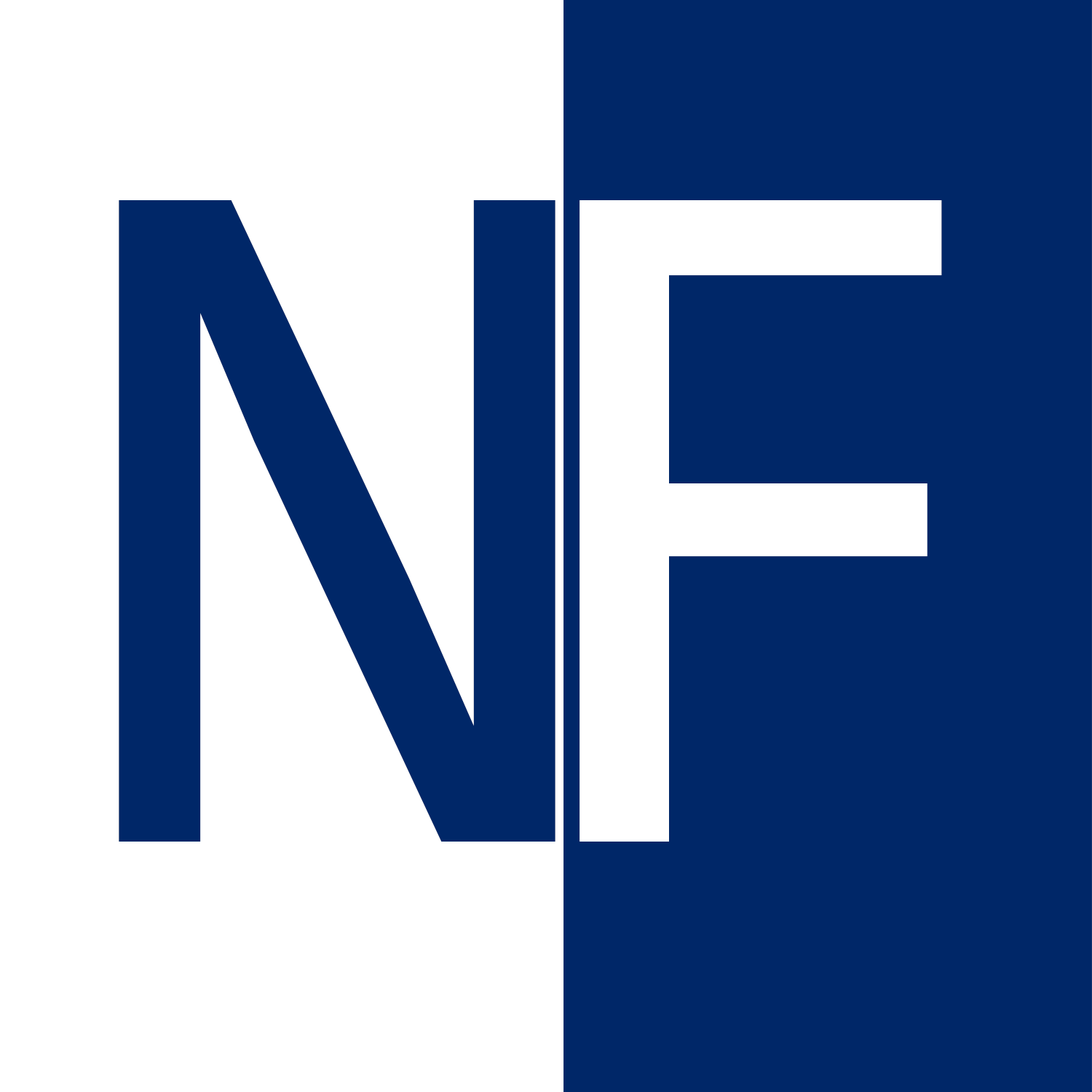
<style>
.page{position:relative;width:1092px;height:1092px;background:#002768}
.page>*{position:absolute;margin:0}
.t1{font:1005.4px "Consolas";color:#002768}
.t2{font:1005.4px "Consolas";color:#ffffff}
</style>
<div class="page">
<p class="t1" style="left:119px;top:200px;width:436px;height:642px">N</p>
<p class="t2" style="left:579px;top:200px;width:363px;height:642px">F</p>
</div>
